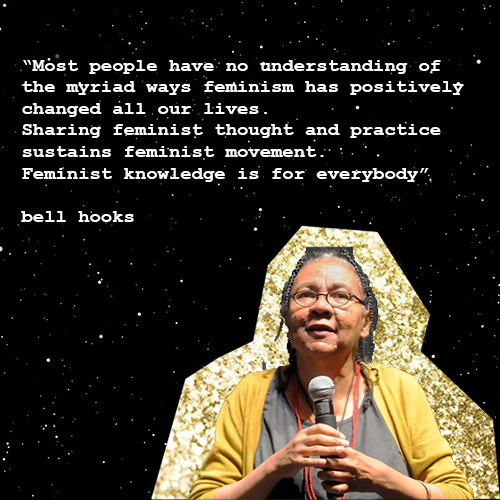
<style>
.page{position:relative;width:500px;height:500px;background:#000000}
.page>*{position:absolute;margin:0}
.t1{font:18px "CourierNewPS-BoldMT";color:#ffffff;scale:1.05 1}
</style>
<div class="page">
<p class="t1" style="left:21px;top:60px;width:443px;height:162px">“Most people have no understanding of <br>the myriad ways feminism has positively <br>changed all our lives. <br>Sharing feminist thought and practice <br>sustains feminist movement. <br>Feminist knowledge is for everybody” <br><br>bell hooks</p>
</div>
